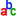
<style>
.page{position:relative;width:16px;height:16px;background:#ffffff}
.page>*{position:absolute;margin:0}
.t1{font:12px "ArialMT";letter-spacing:0.09em;color:#0022ff;font-weight:bold}
.t2{font:12px "ArialMT";letter-spacing:0.09em;color:#ff0000;font-weight:bold}
.t3{font:12px "ArialMT";letter-spacing:0.09em;color:#05a200;font-weight:bold}
</style>
<div class="page">
<p class="t1" style="left:6px;top:0px;width:7px;height:10px">b</p>
<p class="t2" style="left:0px;top:8px;width:7px;height:8px">a</p>
<p class="t3" style="left:10px;top:8px;width:6px;height:8px">c</p>
</div>
